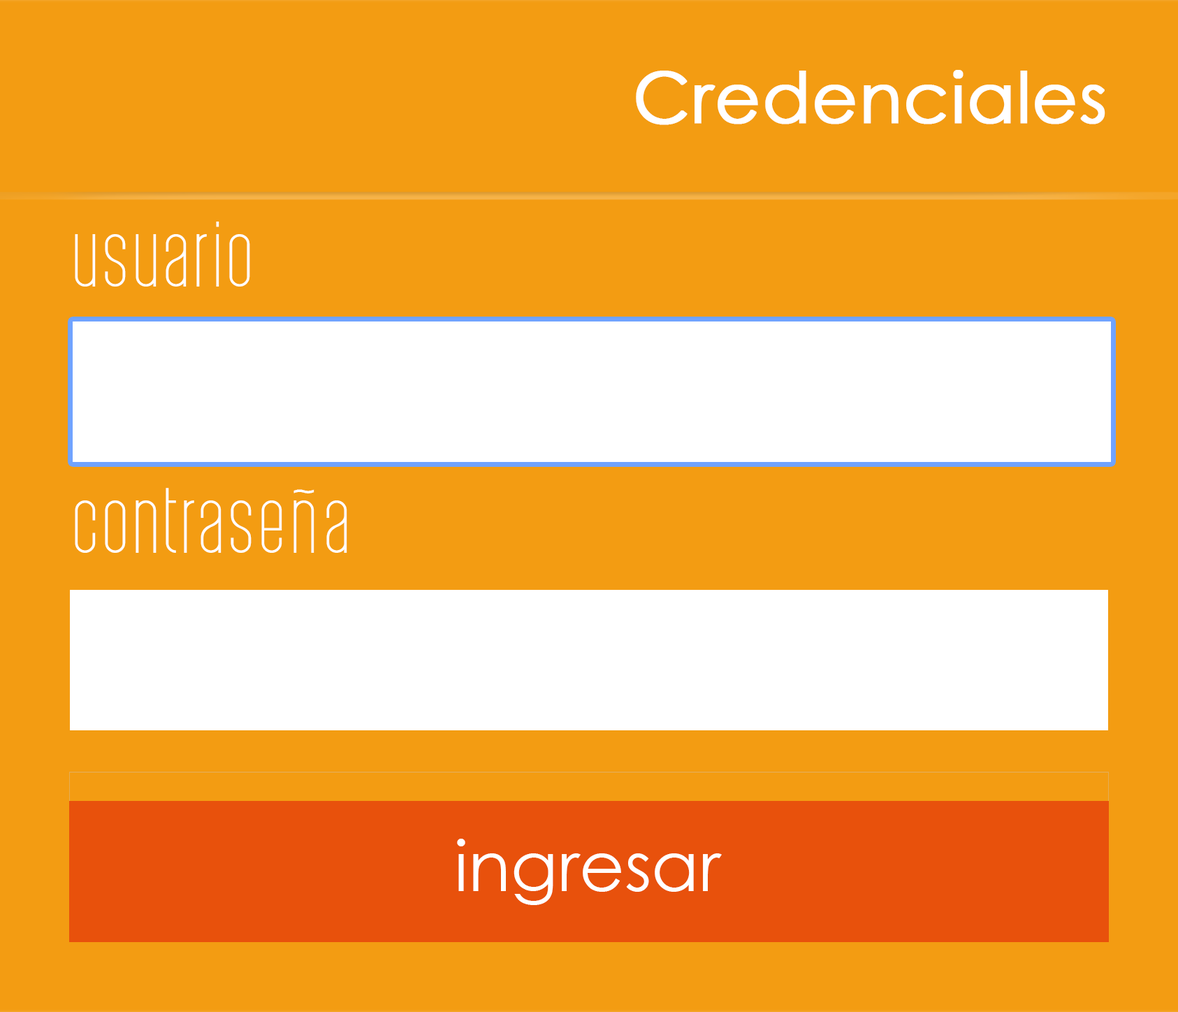
<style>
.page{position:relative;width:1178px;height:1012px;background:#f39c12}
.page>*{position:absolute;margin:0}
.t1{font:69.9px "CenturyGothic";color:#ffffff;font-weight:bold}
.t2{font:69.9px "PostScriptum-Light";color:#ffffff}
.t3{font:69.9px "CenturyGothic";color:#ffffff}
</style>
<div class="page">
<p class="t1" style="left:636px;top:70px;width:470px;height:55px">Credenciales</p>
<p class="t2" style="left:75px;top:222px;width:175px;height:65px">usuario</p>
<p class="t2" style="left:75px;top:488px;width:272px;height:65px">contraseña</p>
<p class="t3" style="left:457px;top:839px;width:265px;height:66px">ingresar</p>
</div>
